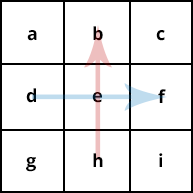
<style>
.page{position:relative;width:193px;height:193px;background:#ffffff}
.page>*{position:absolute;margin:0}
.t1{font:18px "OpenSans-Bold";letter-spacing:-0.025em;color:#000000}
.t2{font:18px "OpenSans-Bold";letter-spacing:-0.025em}
</style>
<div class="page">
<p class="t1" style="left:27px;top:30px;width:10px;height:11px">a</p>
<p class="t1" style="left:93px;top:26px;width:10px;height:15px">b</p>
<p class="t1" style="left:156px;top:30px;width:9px;height:11px">c</p>
<p class="t1" style="left:26px;top:88px;width:10px;height:15px">d</p>
<p class="t1" style="left:158px;top:89px;width:8px;height:14px">f</p>
<p class="t2" style="left:92px;top:92px;width:10px;height:11px">e</p>
<p class="t1" style="left:26px;top:157px;width:10px;height:15px">g</p>
<p class="t1" style="left:93px;top:153px;width:10px;height:14px">h</p>
<p class="t1" style="left:159px;top:153px;width:4px;height:14px">i</p>
</div>
